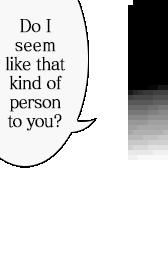
<style>
.page{position:relative;width:168px;height:256px;background:#ffffff}
.page>*{position:absolute;margin:0}
.t1{font:17.6px/19px "MatissePro-M";letter-spacing:-0.05em;color:#000000;font-weight:bold;scale:0.91 1}
.t2{font:17.6px/19px "MatissePro-M";letter-spacing:0.005em;color:#000000;font-weight:bold;scale:0.91 1}
.t3{font:17.6px/19px "MatissePro-M";letter-spacing:-0.075em;color:#000000;font-weight:bold;scale:0.91 1}
</style>
<div class="page">
<p class="t1" style="left:5px;top:19px;width:60px;height:112px;text-align:center">Do I<br><span class="t2">seem<br></span>like that<br>kind of<br>person<br><span class="t3">to you?</span></p>
</div>
